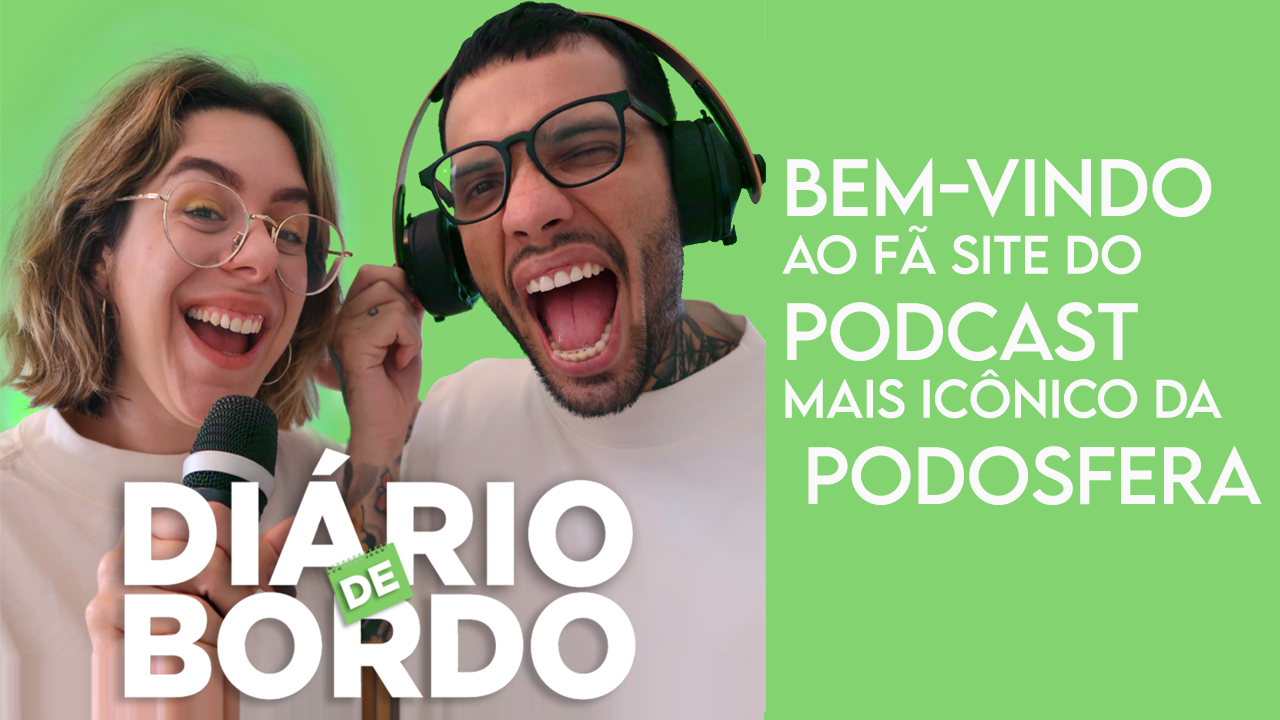
<style>
.page{position:relative;width:1280px;height:720px;background:#83d370}
.page>*{position:absolute;margin:0}
.t1{font:48px "LEMONMILK-Regular";color:#fafafa}
.t2{font:72px "LEMONMILK-Regular";color:#fafafa}
</style>
<div class="page">
<p class="t1" style="left:782px;top:158px;width:480px;height:347px"><span class="t2">BEM-VINDO<br></span>AO FÃ SITE DO <br><span class="t2">PODCAST<br></span>MAIS ICÔNICO DA<br><span class="t2"> PODOSFERA</span></p>
</div>
